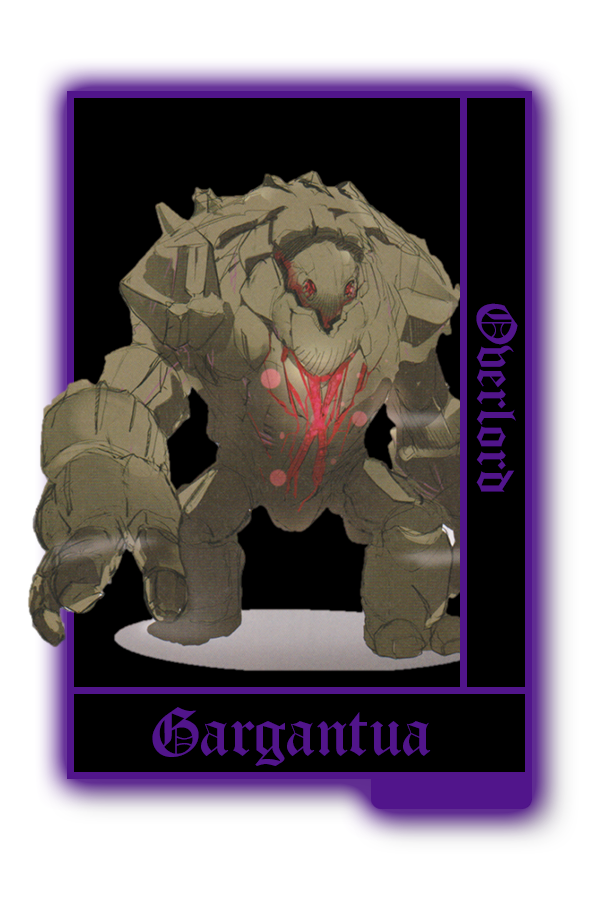
<style>
.page{position:relative;width:600px;height:900px;background:#000000}
.page>*{position:absolute;margin:0}
.t1{font:61.5px "OldLondon";color:#51158b}
.t2{font:75px "OldLondon";color:#51158b}
</style>
<div class="page">
<p class="t1" style="left:476px;top:303px;width:42px;height:189px;rotate:90deg">Overlord</p>
<p class="t2" style="left:152px;top:707px;width:279px;height:59px">Gargantua</p>
</div>
